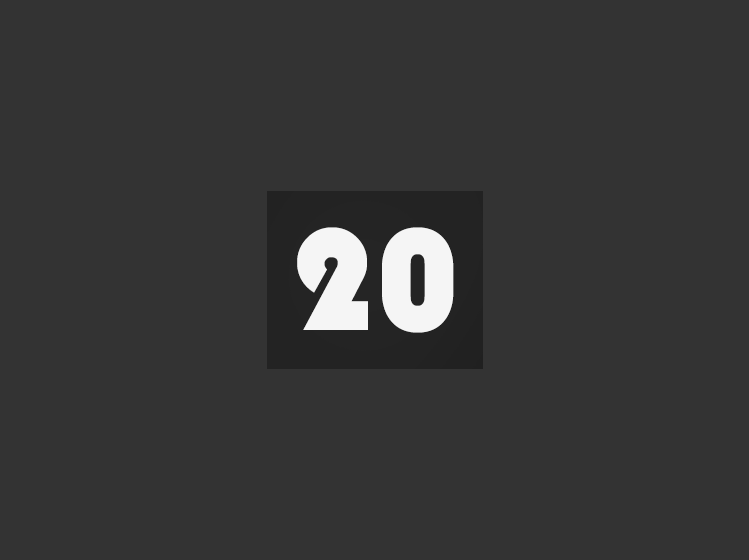
<style>
.page{position:relative;width:749px;height:560px;background:#333333}
.page>*{position:absolute;margin:0}
.t1{font:150px "Bauhaus93";color:#f5f5f5;font-variant:small-caps}
</style>
<div class="page">
<p class="t1" style="left:297px;top:227px;width:157px;height:106px">20</p>
</div>
